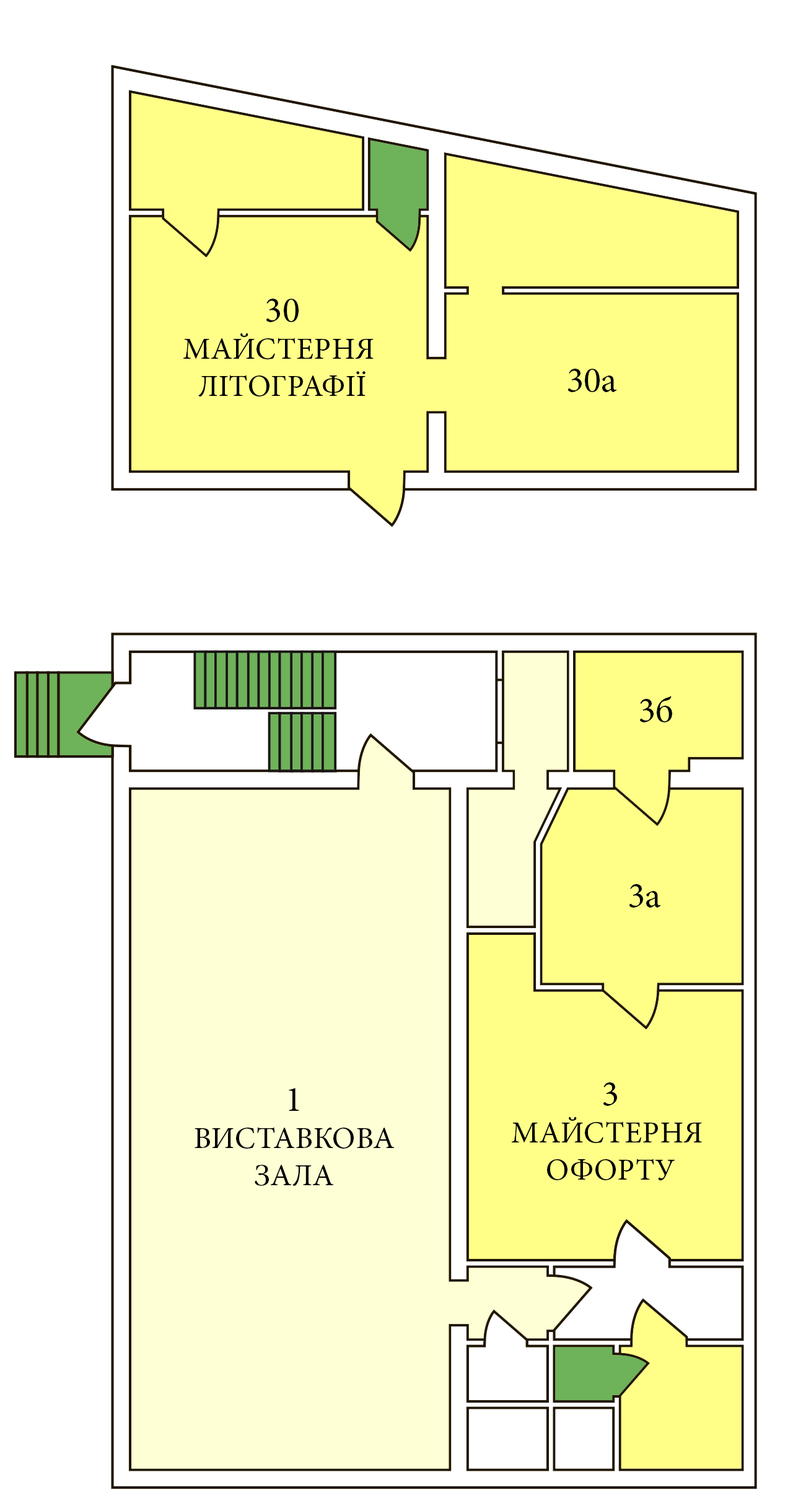
<style>
.page{position:relative;width:793px;height:1503px;background:#ffffff}
.page>*{position:absolute;margin:0}
.t1{font:31px "MinionPro-Regular";color:#000000}
.t2{font:36.1px "MinionPro-Regular";color:#000000}
</style>
<div class="page">
<p class="t1" style="left:183px;top:299px;width:191px;height:98px;text-align:center"><span class="t2">30<br></span>МАЙСТЕРНЯ <br>ЛІТОГРАФІЇ</p>
<p class="t2" style="left:568px;top:369px;width:49px;height:23px">30а</p>
<p class="t2" style="left:640px;top:696px;width:32px;height:27px">3б</p>
<p class="t2" style="left:629px;top:884px;width:32px;height:24px">3а</p>
<p class="t1" style="left:512px;top:1083px;width:190px;height:98px;text-align:center"><span class="t2">3<br></span>МАЙСТЕРНЯ <br>ОФОРТУ</p>
<p class="t1" style="left:195px;top:1088px;width:199px;height:98px;text-align:center"><span class="t2">1<br></span>ВИСТАВКОВА<br>ЗАЛА</p>
</div>
